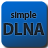
<style>
.page{position:relative;width:48px;height:48px}
.page>*{position:absolute;margin:0}
.t1{font:9px "MyriadPro-Semibold";color:#1f2933}
.t2{font:16.5px "MyriadPro-Bold";color:#1f2933}
</style>
<div class="page">
<p class="t1" style="left:3px;top:11px;width:42px;height:24px;text-align:center">simple<br><span class="t2">DLNA</span></p>
</div>
